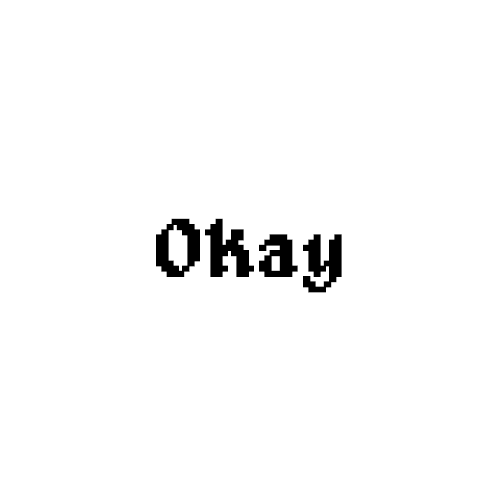
<style>
.page{position:relative;width:500px;height:500px;background:#ffffff}
.page>*{position:absolute;margin:0}
.t1{font:83.2px "Alagard";color:#000000;font-weight:bold}
</style>
<div class="page">
<p class="t1" style="left:156px;top:218px;width:186px;height:75px">Okay</p>
</div>
